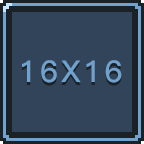
<style>
.page{position:relative;width:144px;height:144px;background:#32445a}
.page>*{position:absolute;margin:0}
.t1{font:30px "PingFang-SC-Bold";letter-spacing:0.1em;color:#71a2ce}
</style>
<div class="page">
<p class="t1" style="left:22px;top:60px;width:100px;height:23px">16X16</p>
</div>
